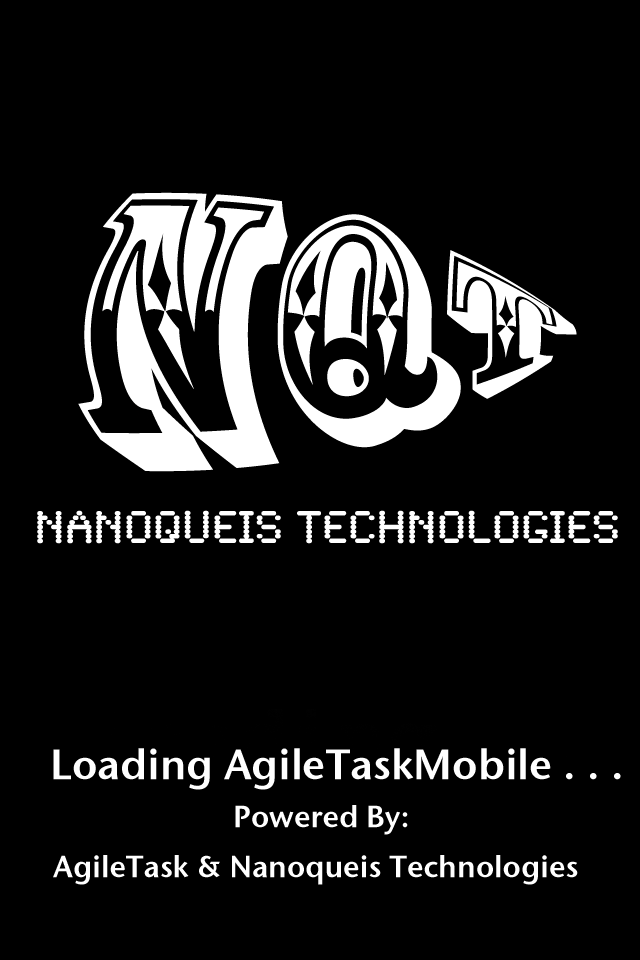
<style>
.page{position:relative;width:640px;height:960px;background:#000000}
.page>*{position:absolute;margin:0}
.t1{font:200px "RosewoodStd-Regular";color:#ffffff}
.t2{font:48px "SynchroLET";color:#ffffff}
.t3{font:42px "StoneSansSemITCTTSemi";color:#ffffff}
.t4{font:30px "StoneSansSemITCTTSemi";color:#ffffff}
</style>
<div class="page">
<p class="t1" style="left:78px;top:192px;width:499px;height:280px">NQT</p>
<p class="t2" style="left:37px;top:510px;width:581px;height:34px">NanoQueis Technologies</p>
<p class="t3" style="left:53px;top:748px;width:568px;height:42px">Loading AgileTaskMobile . . .</p>
<p class="t4" style="left:53px;top:805px;width:525px;height:80px;text-align:center">Powered By:<br>AgileTask &amp; Nanoqueis Technologies</p>
</div>
